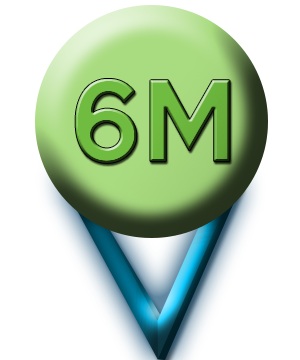
<style>
.page{position:relative;width:300px;height:360px;background:#ffffff}
.page>*{position:absolute;margin:0}
.t1{font:101px "KeepCalm-Medium";color:#70ba3f}
</style>
<div class="page">
<p class="t1" style="left:75px;top:79px;width:155px;height:84px">6M</p>
</div>
